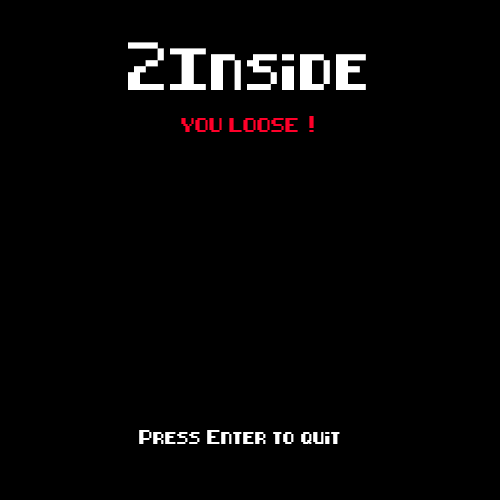
<style>
.page{position:relative;width:500px;height:500px;background:#000000}
.page>*{position:absolute;margin:0}
.t1{font:35.6px "8-bit-pusab";color:#ffffff}
.t2{font:12px "8-bit-pusab";color:#ff002a}
.t3{font:12px "8-bit-pusab";color:#ffffff}
</style>
<div class="page">
<p class="t1" style="left:128px;top:42px;width:238px;height:48px">2Inside</p>
<p class="t2" style="left:181px;top:116px;width:133px;height:16px">YOU LOOSE !</p>
<p class="t3" style="left:139px;top:430px;width:201px;height:14px">Press Enter to quit</p>
</div>
